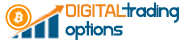
<style>
.page{position:relative;width:184px;height:40px;background:#ffffff}
.page>*{position:absolute;margin:0}
.t1{font:16.7px/18.5px "StarAvenue";letter-spacing:-0.01em;color:#045b88}
.t2{font:18.5px/18.5px "BrainWants";letter-spacing:-0.01em;color:#f08619}
</style>
<div class="page">
<p class="t1" style="left:65px;top:2px;width:114px;height:40px"><span class="t2">DIGITAL</span>Trading<br>Options</p>
</div>
